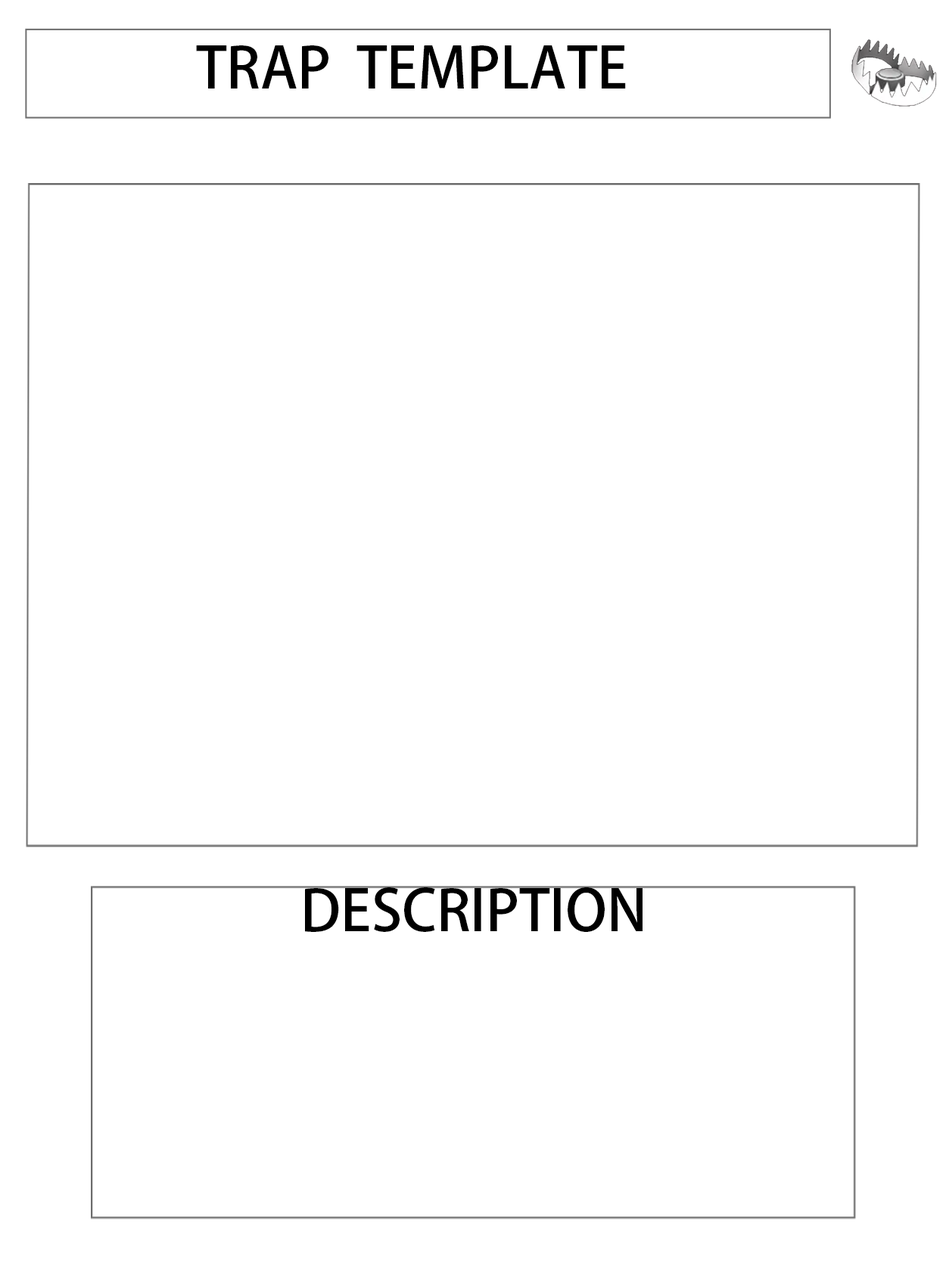
<style>
.page{position:relative;width:946px;height:1261px;background:#ffffff}
.page>*{position:absolute;margin:0}
.t1{font:56.7px "AdobeHeitiStd-Regular";color:#000000}
</style>
<div class="page">
<p class="t1" style="left:196px;top:45px;width:430px;height:44px">TRAP  TEMPLATE</p>
<p class="t1" style="left:305px;top:887px;width:337px;height:45px">DESCRIPTION</p>
</div>
